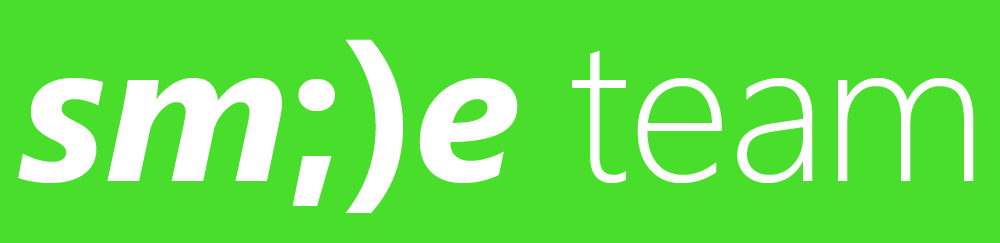
<style>
.page{position:relative;width:1000px;height:243px;background:#49de2c}
.page>*{position:absolute;margin:0}
.t1{font:201px "SegoeUI-BoldItalic";color:#ffffff}
.t2{font:201px "SegoeUI-Bold";color:#ffffff}
.t3{font:201px "SegoeUI-Bold";letter-spacing:-0.02em;color:#ffffff}
.t4{font:201px "SegoeUI-BoldItalic";letter-spacing:-0.02em;color:#ffffff}
.t5{font:201px "SegoeUI-Light";color:#ffffff}
.t6{font:201px "SegoeUI-Light";letter-spacing:-0.02em;color:#ffffff}
</style>
<div class="page">
<p class="t1" style="left:18px;top:39px;width:956px;height:174px">sm<span class="t2">;</span><span class="t3">)</span><span class="t4">e </span><span class="t5">t</span><span class="t6">ea</span><span class="t5">m</span></p>
</div>
